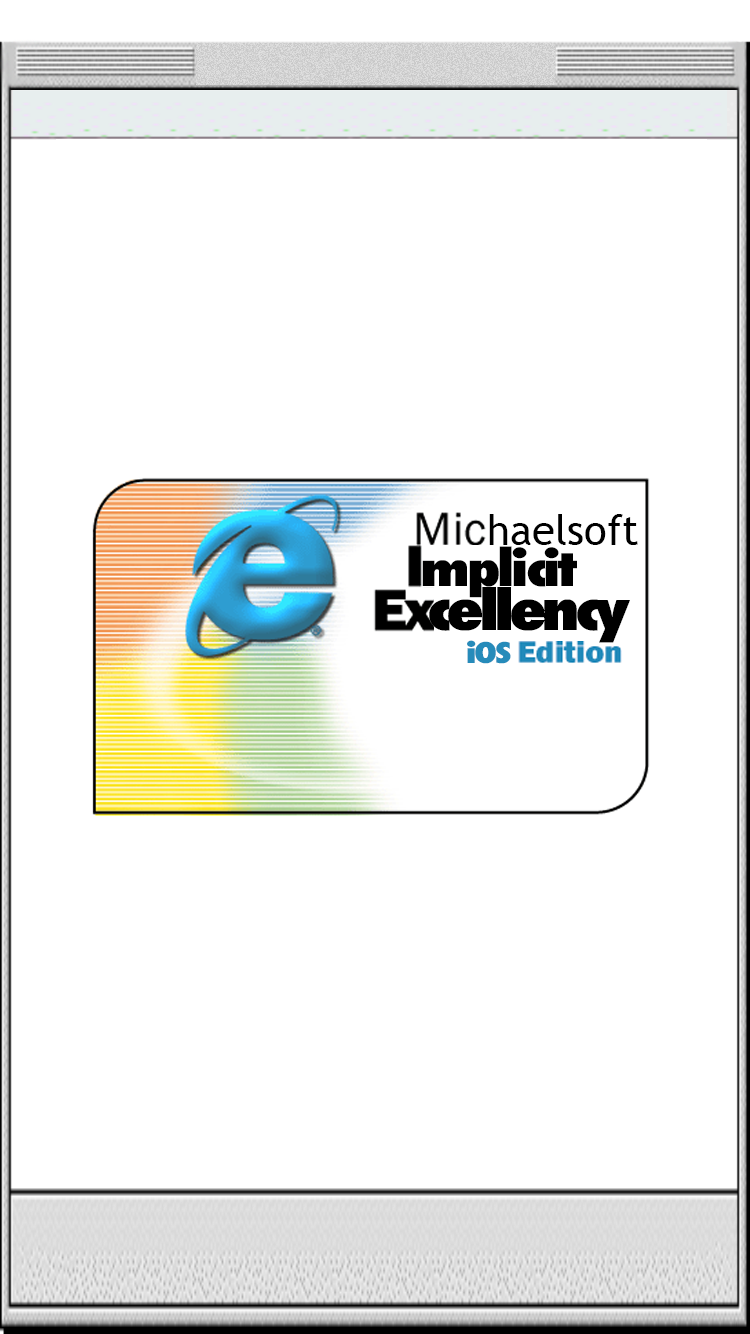
<style>
.page{position:relative;width:750px;height:1334px;background:#ffffff}
.page>*{position:absolute;margin:0}
.t1{font:42px "TrebuchetMS";color:#000000}
.t2{font:48px "Futura-CondensedExtraBold";letter-spacing:-0.05em;color:#000000;scale:1.25 1}
.t3{font:56.7px "Futura-CondensedExtraBold";letter-spacing:-0.075em;color:#000000;scale:1.23 1}
.t4{font:27.7px "Futura-CondensedExtraBold";letter-spacing:-0.05em;color:#268bba;scale:1.3 1}
</style>
<div class="page">
<p class="t1" style="left:489px;top:514px;width:149px;height:31px">haelsoft</p>
<p class="t2" style="left:422px;top:546px;width:155px;height:52px">mplicit</p>
<p class="t3" style="left:429px;top:583px;width:201px;height:60px">cellency</p>
<p class="t4" style="left:467px;top:640px;width:44px;height:24px">iOS</p>
</div>
